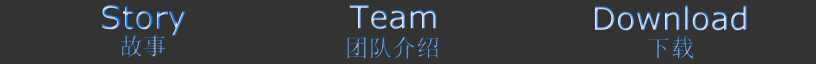
<style>
.page{position:relative;width:816px;height:64px;background:#333333}
.page>*{position:absolute;margin:0}
.t1{font:32px "Verdana"}
.t2{font:24px "SimSun"}
</style>
<div class="page">
<p class="t1" style="left:102px;top:5px;width:84px;height:31px">Story</p>
<p class="t1" style="left:349px;top:5px;width:88px;height:24px">Team</p>
<p class="t1" style="left:595px;top:5px;width:152px;height:26px">Download</p>
<p class="t2" style="left:120px;top:34px;width:46px;height:23px">故事</p>
<p class="t2" style="left:347px;top:36px;width:92px;height:23px">团队介绍</p>
<p class="t2" style="left:648px;top:36px;width:46px;height:23px">下载</p>
</div>
